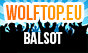
<style>
.page{position:relative;width:88px;height:53px;background:#000000}
.page>*{position:absolute;margin:0}
.t1{font:21px "BebasNeue"}
.t2{font:17px "BebasNeue";color:#ffffff}
</style>
<div class="page">
<p class="t1" style="left:6px;top:5px;width:76px;height:15px">wolftop.eu</p>
<p class="t2" style="left:24px;top:32px;width:39px;height:12px">balsot</p>
</div>
